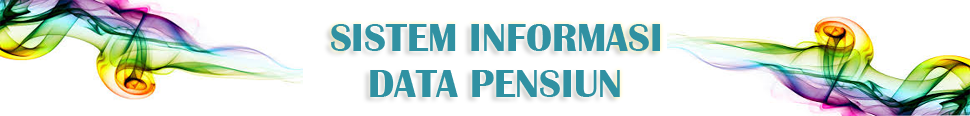
<style>
.page{position:relative;width:970px;height:116px;background:#ffffff}
.page>*{position:absolute;margin:0}
.t1{font:40px "BritannicBold";color:#3091a2}
</style>
<div class="page">
<p class="t1" style="left:331px;top:24px;width:329px;height:27px">SISTEM INFORMASI</p>
<p class="t1" style="left:370px;top:70px;width:250px;height:27px">DATA PENSIUN</p>
</div>
